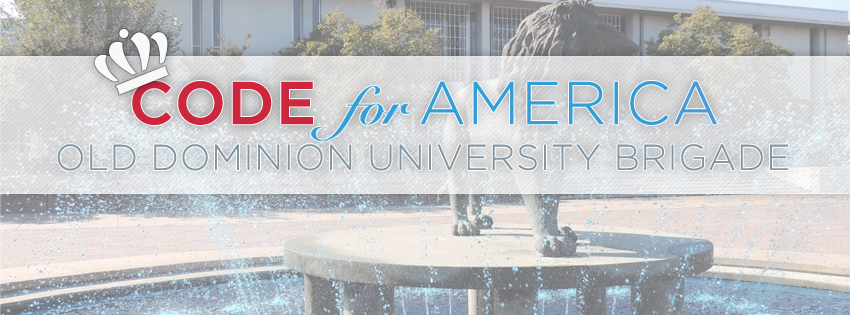
<style>
.page{position:relative;width:850px;height:315px}
.page>*{position:absolute;margin:0}
.t1{font:60px "GothamLight";color:#349ed8;font-weight:bold}
.t2{font:60px "GothamMedium";color:#cd273f;font-weight:bold}
.t3{font:60px "GothamLight";color:#4a9bd9;font-weight:bold}
.t4{font:36px "GothamLight";color:#8496a3;font-weight:bold}
</style>
<div class="page">
<p class="t1" style="left:132px;top:81px;width:585px;height:44px"><span class="t2">CODE       </span>AMERIC<span class="t3">A</span></p>
<p class="t4" style="left:57px;top:144px;width:732px;height:27px">OLD DOMINION UNIVERSITY BRIGADE</p>
</div>
